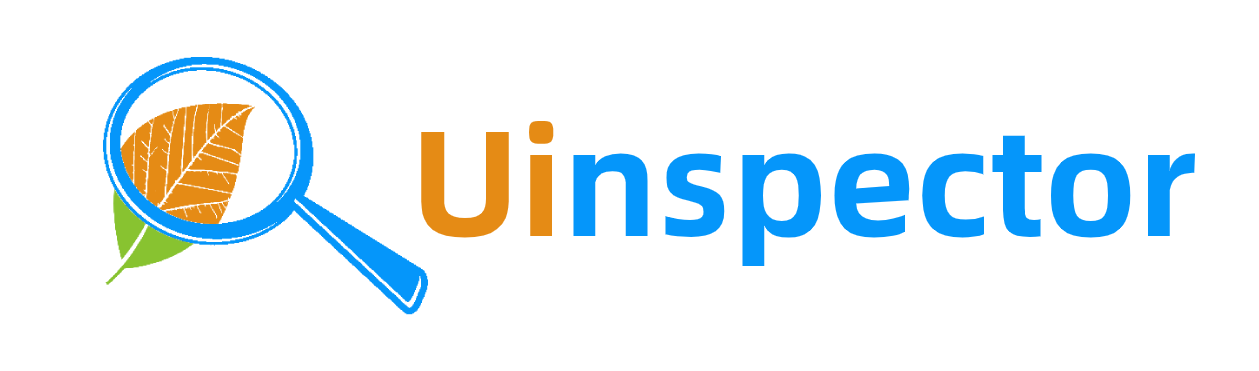
<style>
.page{position:relative;width:1259px;height:371px;background:#ffffff}
.page>*{position:absolute;margin:0}
.t1{font:150px "AlibabaPuHuiTi-Bold";color:#0596fa}
.t2{font:150px "AlibabaPuHuiTi-Bold";color:#e58b15}
</style>
<div class="page">
<p class="t1" style="left:421px;top:120px;width:774px;height:146px"><span class="t2">Ui</span>nspector</p>
</div>
